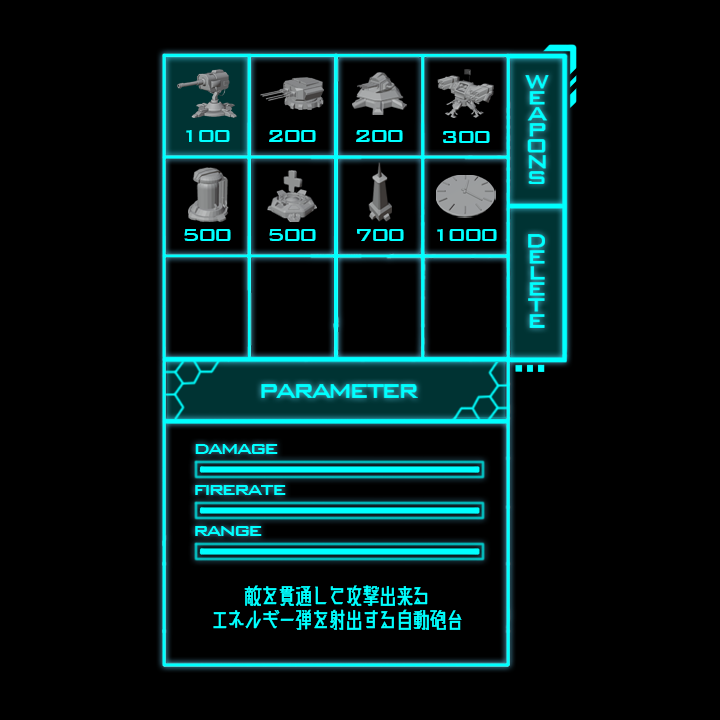
<style>
.page{position:relative;width:720px;height:720px;background:#000000}
.page>*{position:absolute;margin:0}
.t1{font:24px "BankGothicBT-Medium";letter-spacing:-0.1em;color:#00ffff}
.t2{font:24px/24px "Kaisotai-Next-UP-B";letter-spacing:-0.1em;color:#00ffff}
</style>
<div class="page">
<p class="t1" style="left:186px;top:130px;width:44px;height:12px">100</p>
<p class="t1" style="left:269px;top:130px;width:47px;height:12px">200</p>
<p class="t1" style="left:356px;top:130px;width:47px;height:12px">200</p>
<p class="t1" style="left:443px;top:131px;width:47px;height:12px">300</p>
<p class="t1" style="left:184px;top:229px;width:47px;height:12px">500</p>
<p class="t1" style="left:269px;top:229px;width:47px;height:12px">500</p>
<p class="t1" style="left:357px;top:229px;width:47px;height:12px">700</p>
<p class="t1" style="left:437px;top:229px;width:60px;height:12px">1000</p>
<p class="t2" style="left:213px;top:585px;width:249px;height:45px;text-align:center">敵を貫通して攻撃出来る<br>エネルギー弾を射出する自動砲台</p>
</div>
